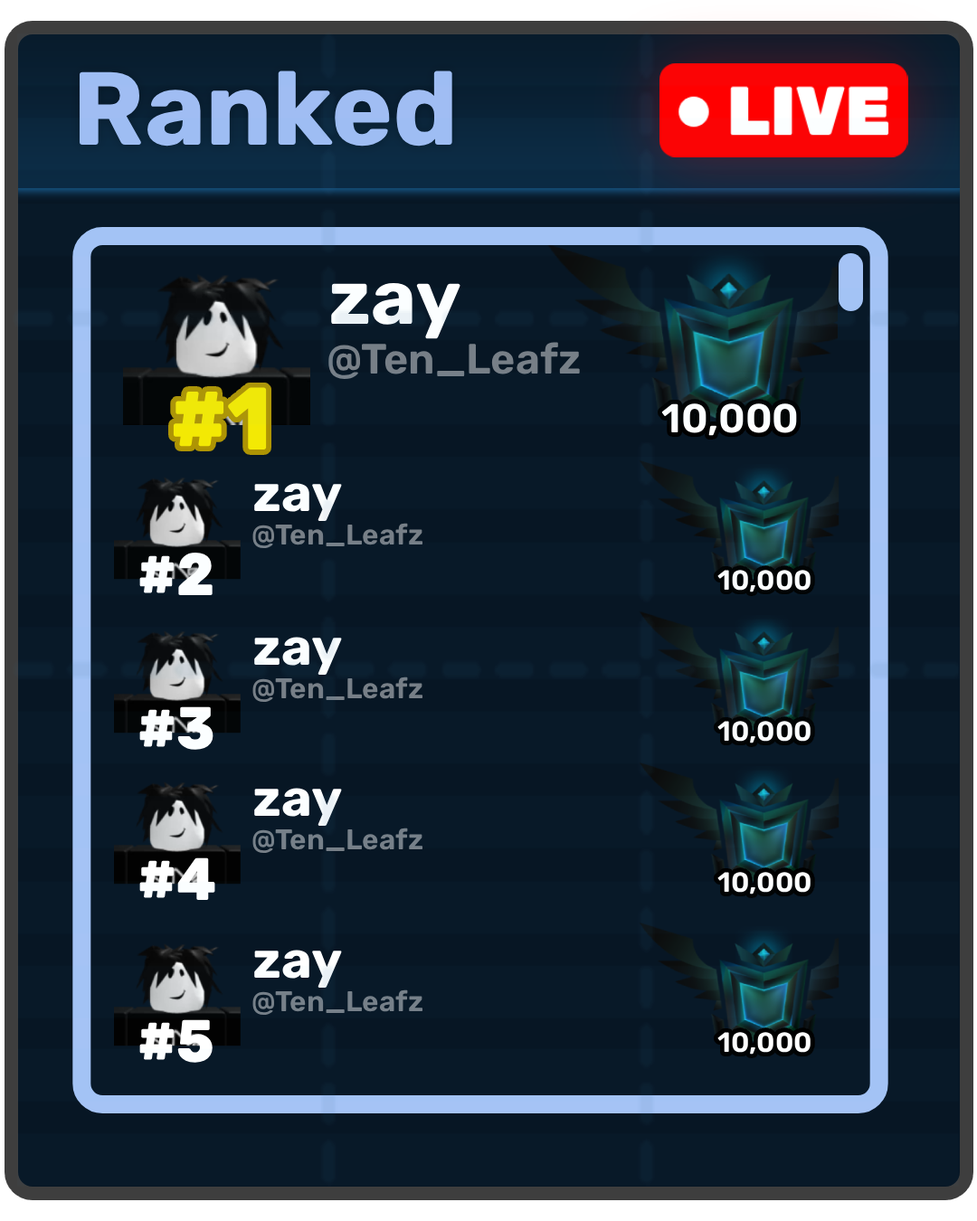
<style>
.page{position:relative;width:977px;height:1221px;background:#081928}
.page>*{position:absolute;margin:0}
.t1{font:103.8px "Rubik-Bold";color:#a5c3f5}
.t2{font:76.9px "Rubik-Bold";color:#ffffff}
.t3{font:42.2px "Rubik-SemiBold";color:#777f87}
.t4{font:88.5px "Rubik-ExtraBold";color:#f5ec03;scale:0.94 1}
.t5{font:40.3px "Rubik-SemiBold";color:#ffffff}
.t6{font:51.9px "Rubik-Bold";color:#ffffff}
.t7{font:28.5px "Rubik-SemiBold";color:#777f87}
.t8{font:59.7px "Rubik-ExtraBold";color:#fbfeff;scale:0.94 1}
.t9{font:27.7px "Rubik-SemiBold";color:#ffffff}
.t10{font:28.5px "Rubik-SemiBold";color:#768089}
.t11{font:59.7px "Rubik-ExtraBold";color:#fdfeff;scale:0.94 1}
.t12{font:59.7px "Rubik-ExtraBold";color:#ffffff;scale:0.94 1}
</style>
<div class="page">
<p class="t1" style="left:79px;top:71px;width:373px;height:76px">Ranked</p>
<p class="t2" style="left:331px;top:283px;width:129px;height:56px">zay</p>
<p class="t3" style="left:328px;top:342px;width:252px;height:37px">@Ten_Leafz</p>
<p class="t4" style="left:173px;top:387px;width:94px;height:62px">#1</p>
<p class="t5" style="left:661px;top:403px;width:136px;height:33px">10,000</p>
<p class="t6" style="left:254px;top:483px;width:88px;height:38px">zay</p>
<p class="t7" style="left:252px;top:523px;width:170px;height:25px">@Ten_Leafz</p>
<p class="t8" style="left:139px;top:552px;width:74px;height:44px">#2</p>
<p class="t9" style="left:717px;top:570px;width:93px;height:22px">10,000</p>
<p class="t6" style="left:254px;top:637px;width:88px;height:38px">zay</p>
<p class="t7" style="left:252px;top:676px;width:170px;height:26px">@Ten_Leafz</p>
<p class="t8" style="left:139px;top:706px;width:74px;height:44px">#3</p>
<p class="t9" style="left:717px;top:721px;width:93px;height:22px">10,000</p>
<p class="t6" style="left:254px;top:788px;width:88px;height:38px">zay</p>
<p class="t10" style="left:252px;top:827px;width:170px;height:26px">@Ten_Leafz</p>
<p class="t11" style="left:139px;top:857px;width:76px;height:44px">#4</p>
<p class="t9" style="left:717px;top:872px;width:93px;height:22px">10,000</p>
<p class="t6" style="left:254px;top:950px;width:88px;height:38px">zay</p>
<p class="t10" style="left:252px;top:989px;width:170px;height:26px">@Ten_Leafz</p>
<p class="t12" style="left:139px;top:1019px;width:74px;height:44px">#5</p>
<p class="t9" style="left:717px;top:1032px;width:93px;height:22px">10,000</p>
</div>
